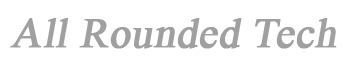
<style>
.page{position:relative;width:343px;height:65px;background:#ffffff}
.page>*{position:absolute;margin:0}
.t1{font:42px "TimesNewRomanPSMT";color:#a0a0a0;font-weight:bold;font-style:italic}
</style>
<div class="page">
<p class="t1" style="left:10px;top:18px;width:327px;height:31px">All Rounded Tech</p>
</div>
